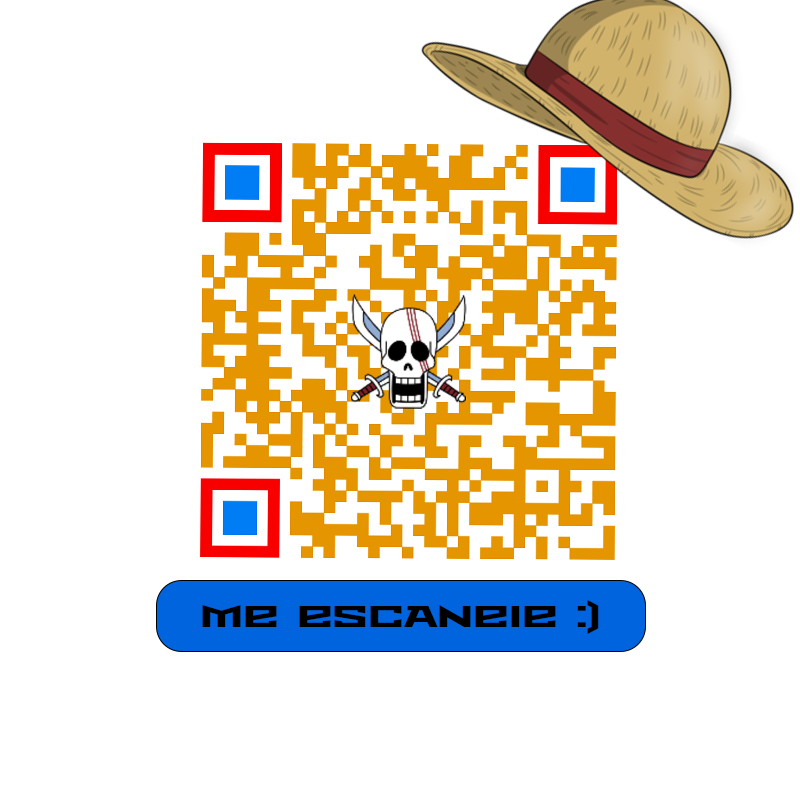
<style>
.page{position:relative;width:800px;height:800px;background:#ffffff}
.page>*{position:absolute;margin:0}
.t1{font:30px "Metro";color:#000000;text-transform:uppercase}
</style>
<div class="page">
<p class="t1" style="left:202px;top:600px;width:397px;height:34px">me escaneie :)</p>
</div>
